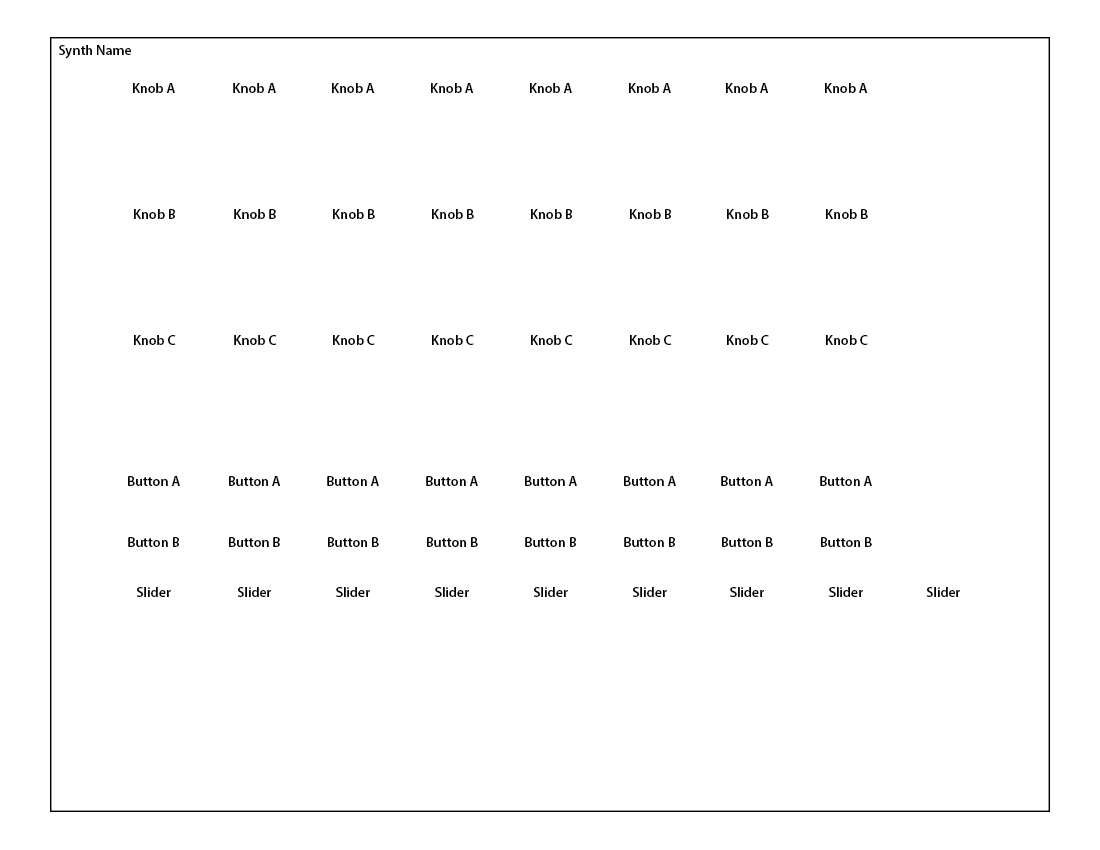
<style>
.page{position:relative;width:1100px;height:850px;background:#ffffff}
.page>*{position:absolute;margin:0}
.t1{font:13.9px "MyriadPro-Semibold";color:#000000}
</style>
<div class="page">
<p class="t1" style="left:59px;top:45px;width:72px;height:14px">Synth Name</p>
<p class="t1" style="left:133px;top:83px;width:42px;height:10px">Knob A</p>
<p class="t1" style="left:233px;top:83px;width:43px;height:10px">Knob A</p>
<p class="t1" style="left:332px;top:83px;width:43px;height:10px">Knob A</p>
<p class="t1" style="left:431px;top:83px;width:43px;height:10px">Knob A</p>
<p class="t1" style="left:530px;top:83px;width:42px;height:10px">Knob A</p>
<p class="t1" style="left:629px;top:83px;width:42px;height:10px">Knob A</p>
<p class="t1" style="left:726px;top:83px;width:43px;height:10px">Knob A</p>
<p class="t1" style="left:825px;top:83px;width:43px;height:10px">Knob A</p>
<p class="t1" style="left:134px;top:209px;width:41px;height:10px">Knob B</p>
<p class="t1" style="left:234px;top:209px;width:42px;height:10px">Knob B</p>
<p class="t1" style="left:333px;top:209px;width:42px;height:10px">Knob B</p>
<p class="t1" style="left:432px;top:209px;width:42px;height:10px">Knob B</p>
<p class="t1" style="left:531px;top:209px;width:41px;height:10px">Knob B</p>
<p class="t1" style="left:630px;top:209px;width:41px;height:10px">Knob B</p>
<p class="t1" style="left:727px;top:209px;width:42px;height:10px">Knob B</p>
<p class="t1" style="left:826px;top:209px;width:42px;height:10px">Knob B</p>
<p class="t1" style="left:134px;top:335px;width:42px;height:10px">Knob C</p>
<p class="t1" style="left:234px;top:335px;width:43px;height:10px">Knob C</p>
<p class="t1" style="left:333px;top:335px;width:42px;height:10px">Knob C</p>
<p class="t1" style="left:432px;top:335px;width:42px;height:10px">Knob C</p>
<p class="t1" style="left:531px;top:335px;width:42px;height:10px">Knob C</p>
<p class="t1" style="left:630px;top:335px;width:42px;height:10px">Knob C</p>
<p class="t1" style="left:727px;top:335px;width:42px;height:10px">Knob C</p>
<p class="t1" style="left:826px;top:335px;width:42px;height:10px">Knob C</p>
<p class="t1" style="left:128px;top:476px;width:52px;height:10px">Button A</p>
<p class="t1" style="left:229px;top:476px;width:52px;height:10px">Button A</p>
<p class="t1" style="left:327px;top:476px;width:52px;height:10px">Button A</p>
<p class="t1" style="left:426px;top:476px;width:52px;height:10px">Button A</p>
<p class="t1" style="left:525px;top:476px;width:52px;height:10px">Button A</p>
<p class="t1" style="left:624px;top:476px;width:52px;height:10px">Button A</p>
<p class="t1" style="left:721px;top:476px;width:52px;height:10px">Button A</p>
<p class="t1" style="left:820px;top:476px;width:52px;height:10px">Button A</p>
<p class="t1" style="left:128px;top:537px;width:51px;height:10px">Button B</p>
<p class="t1" style="left:229px;top:537px;width:51px;height:10px">Button B</p>
<p class="t1" style="left:328px;top:537px;width:51px;height:10px">Button B</p>
<p class="t1" style="left:427px;top:537px;width:51px;height:10px">Button B</p>
<p class="t1" style="left:525px;top:537px;width:51px;height:10px">Button B</p>
<p class="t1" style="left:624px;top:537px;width:51px;height:10px">Button B</p>
<p class="t1" style="left:722px;top:537px;width:51px;height:10px">Button B</p>
<p class="t1" style="left:821px;top:537px;width:51px;height:10px">Button B</p>
<p class="t1" style="left:136px;top:587px;width:35px;height:10px">Slider</p>
<p class="t1" style="left:237px;top:587px;width:34px;height:10px">Slider</p>
<p class="t1" style="left:336px;top:587px;width:34px;height:10px">Slider</p>
<p class="t1" style="left:435px;top:587px;width:34px;height:10px">Slider</p>
<p class="t1" style="left:533px;top:587px;width:35px;height:10px">Slider</p>
<p class="t1" style="left:632px;top:587px;width:35px;height:10px">Slider</p>
<p class="t1" style="left:730px;top:587px;width:34px;height:10px">Slider</p>
<p class="t1" style="left:829px;top:587px;width:34px;height:10px">Slider</p>
<p class="t1" style="left:926px;top:587px;width:34px;height:10px">Slider</p>
</div>
